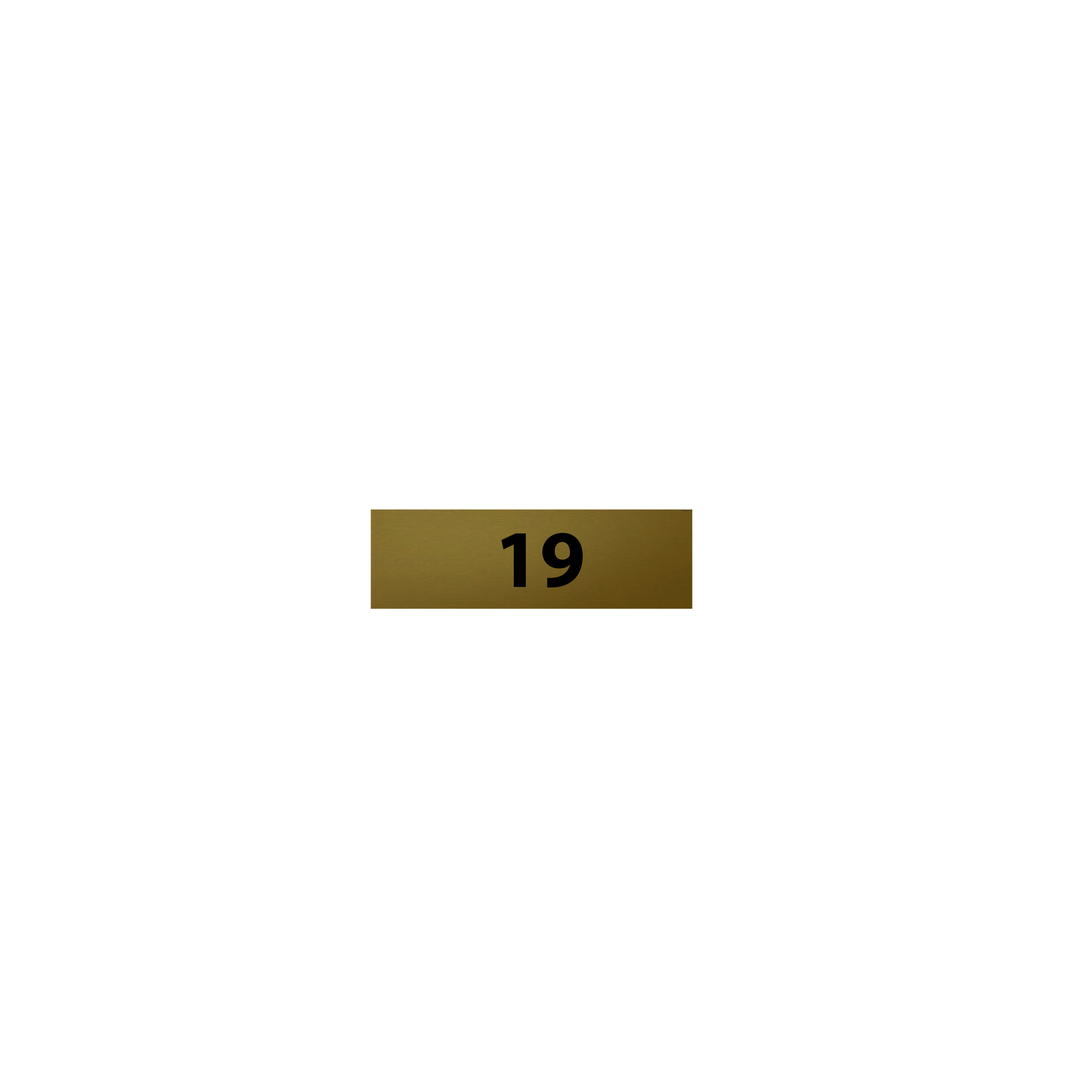
<style>
.page{position:relative;width:1092px;height:1092px;background:#ffffff}
.page>*{position:absolute;margin:0}
.t1{font:81.9px "MyriadPro-Bold";color:#000000}
</style>
<div class="page">
<p class="t1" style="left:501px;top:532px;width:82px;height:56px">19</p>
</div>
